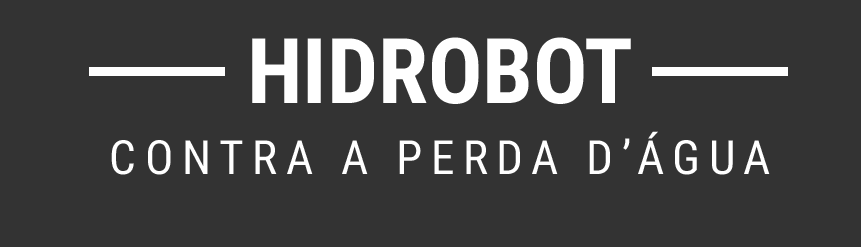
<style>
.page{position:relative;width:861px;height:247px;background:#333333}
.page>*{position:absolute;margin:0}
.t1{font:90.8px "RobotoCondensed-Bold";color:#ffffff}
.t2{font:47.3px "RobotoCondensed-Regular";letter-spacing:0.18em;color:#ffffff}
</style>
<div class="page">
<p class="t1" style="left:252px;top:37px;width:379px;height:67px">HIDROBOT</p>
<p class="t2" style="left:111px;top:131px;width:659px;height:44px">CONTRA A PERDA D’ÁGUA</p>
</div>
